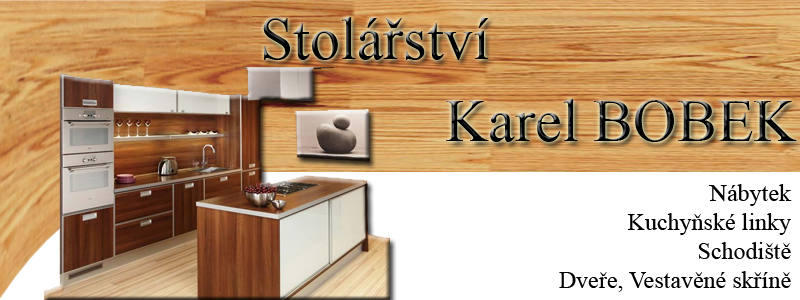
<style>
.page{position:relative;width:800px;height:300px;background:#ffffff}
.page>*{position:absolute;margin:0}
.t1{font:60px "TimesNewRomanPSMT";color:#000000}
.t2{font:24px "TimesNewRomanPSMT";color:#000000}
</style>
<div class="page">
<p class="t1" style="left:263px;top:17px;width:226px;height:43px">Stolářství</p>
<p class="t1" style="left:446px;top:99px;width:351px;height:43px">Karel BOBEK</p>
<p class="t2" style="left:559px;top:184px;width:233px;height:108px;text-align:right">Nábytek<br>Kuchyňské linky<br>Schodiště<br>Dveře, Vestavěné skříně</p>
</div>
